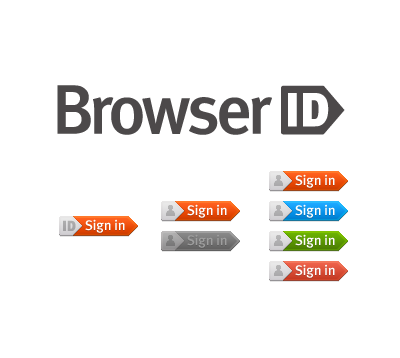
<style>
.page{position:relative;width:400px;height:358px;background:#ffffff}
.page>*{position:absolute;margin:0}
.t1{font:14px "MetaPlusMedium-Roman";letter-spacing:-0.025em;color:#ffffff}
.t2{font:14px "MetaPlusMedium-Roman";letter-spacing:-0.025em;color:#9e9e9e}
</style>
<div class="page">
<p class="t1" style="left:295px;top:174px;width:40px;height:14px">Sign in</p>
<p class="t1" style="left:187px;top:204px;width:40px;height:14px">Sign in</p>
<p class="t1" style="left:295px;top:204px;width:40px;height:14px">Sign in</p>
<p class="t1" style="left:85px;top:219px;width:40px;height:14px">Sign in</p>
<p class="t2" style="left:187px;top:234px;width:40px;height:14px">Sign in</p>
<p class="t1" style="left:295px;top:234px;width:40px;height:14px">Sign in</p>
<p class="t1" style="left:295px;top:264px;width:40px;height:14px">Sign in</p>
</div>
